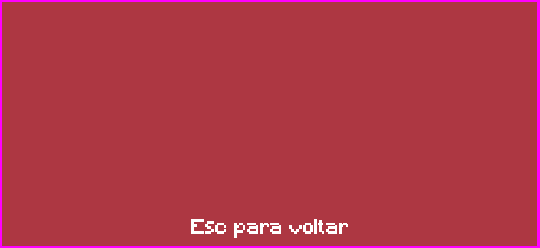
<style>
.page{position:relative;width:540px;height:248px;background:#ad3742}
.page>*{position:absolute;margin:0}
.t1{font:20px "Minecraft";color:#ffffff}
</style>
<div class="page">
<p class="t1" style="left:191px;top:219px;width:157px;height:19px">Esc para voltar</p>
</div>
